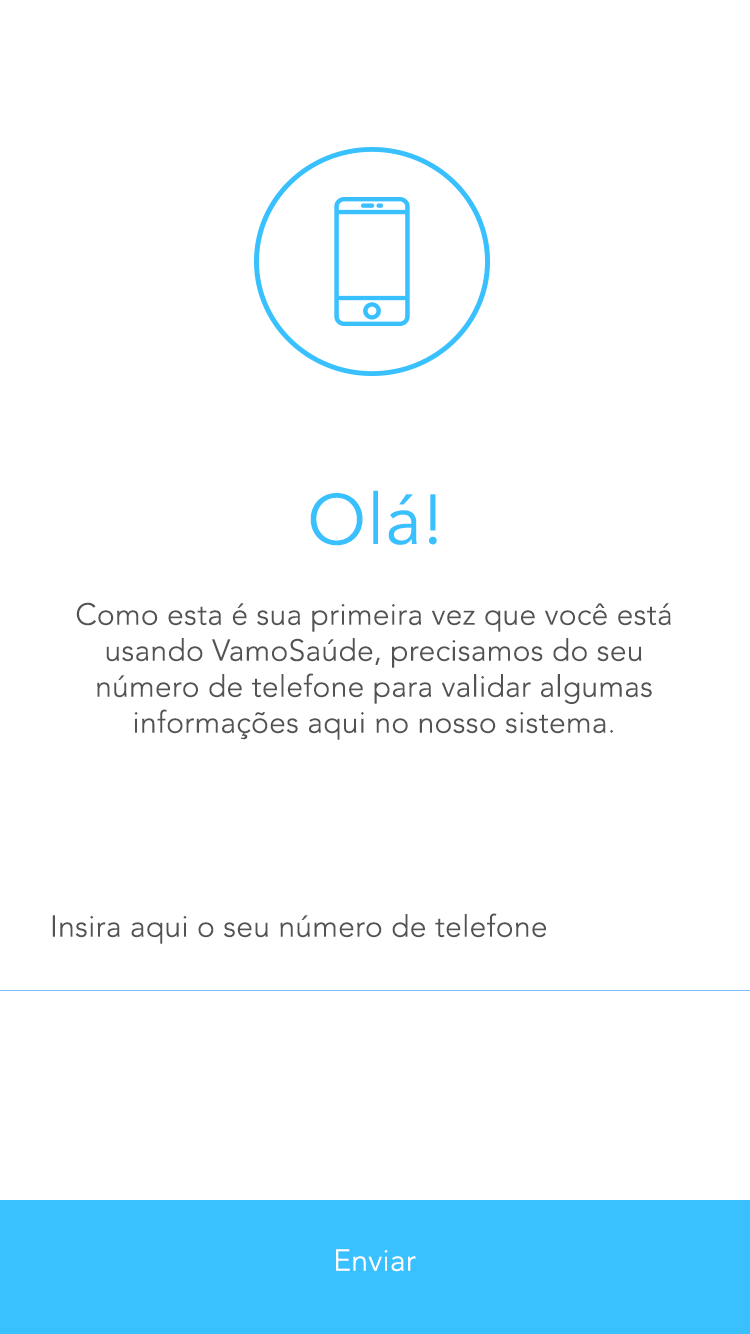
<style>
.page{position:relative;width:750px;height:1334px;background:#ffffff}
.page>*{position:absolute;margin:0}
.t1{font:70px "AvenirLTStd-Book";letter-spacing:0.02em;color:#39c0ff}
.t2{font:30px "AvenirLTStd-Light";letter-spacing:0.01em;color:#535354}
.t3{font:30px "AvenirLTStd-Light";letter-spacing:0.01em;color:#ffffff}
</style>
<div class="page">
<p class="t1" style="left:310px;top:490px;width:127px;height:56px">Olá!</p>
<p class="t2" style="left:76px;top:602px;width:595px;height:138px;text-align:center">Como esta é sua primeira vez que você está usando VamoSaúde, precisamos do seu número de telefone para validar algumas <br>informações aqui no nosso sistema.</p>
<p class="t2" style="left:52px;top:913px;width:494px;height:31px">Insira aqui o seu número de telefone</p>
<p class="t3" style="left:336px;top:1249px;width:80px;height:23px">Enviar</p>
</div>
